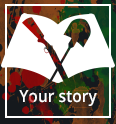
<style>
.page{position:relative;width:116px;height:124px;background:#ffffff}
.page>*{position:absolute;margin:0}
.t1{font:16.7px "OpenSans-Semibold";color:#ffffff;scale:0.94 1}
</style>
<div class="page">
<p class="t1" style="left:19px;top:90px;width:78px;height:16px">Your story</p>
</div>
